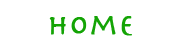
<style>
.page{position:relative;width:180px;height:50px;background:#ffffff}
.page>*{position:absolute;margin:0}
.t1{font:30px "Herculanum";color:#14a405;font-weight:bold}
</style>
<div class="page">
<p class="t1" style="left:49px;top:16px;width:83px;height:20px">Home</p>
</div>
